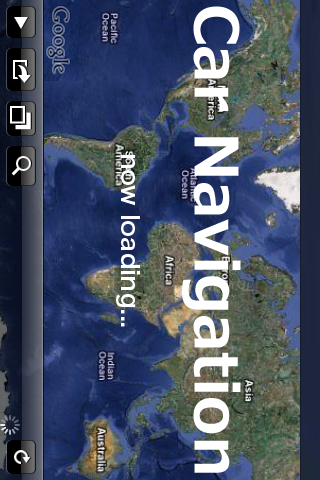
<style>
.page{position:relative;width:320px;height:480px}
.page>*{position:absolute;margin:0}
.t1{font:59.8px "Meiryo-Bold";color:#ffffff}
.t2{font:23.9px "HiraKakuPro-W6";color:#ffffff}
</style>
<div class="page">
<p class="t1" style="left:116px;top:6px;width:125px;height:467px;text-align:center;rotate:90deg">Car Navigation<br><span class="t2">now loading...</span></p>
</div>
